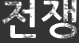
<style>
.page{position:relative;width:79px;height:43px;background:#333333}
.page>*{position:absolute;margin:0}
.t1{font:10.1px "NanumGothicBold"}
</style>
<div class="page">
<p class="t1" style="left:2px;top:0px;width:75px;height:39px;text-align:center">전쟁</p>
</div>
